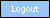
<style>
.page{position:relative;width:50px;height:18px;background:#97c5f6}
.page>*{position:absolute;margin:0}
.t1{font:9px "ArialMT";color:#ffffff}
</style>
<div class="page">
<p class="t1" style="left:12px;top:5px;width:26px;height:9px">Logout</p>
</div>
